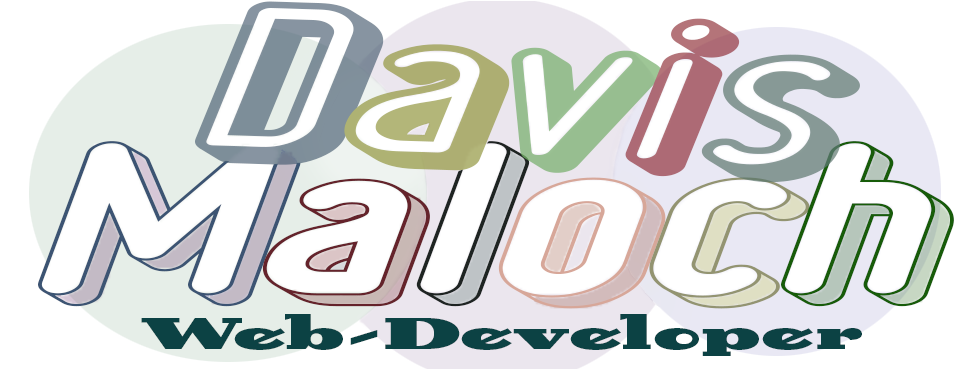
<style>
.page{position:relative;width:977px;height:370px;background:#ffffff}
.page>*{position:absolute;margin:0}
.t1{font:150px "RulerVolume";scale:1.75 1}
.t2{font:150px "RulerVolumeLine";color:#3c5473;scale:1.75 1}
.t3{font:150px "RulerVolumeLine";color:#65232b;scale:1.75 1}
.t4{font:150px "RulerVolumeLine";color:#1e2422;scale:1.75 1}
.t5{font:150px "RulerVolumeLine";color:#d7a799;scale:1.75 1}
.t6{font:150px "RulerVolumeLine";color:#939471;scale:1.75 1}
.t7{font:150px "RulerVolumeLine";color:#175c09;scale:1.75 1}
.t8{font:50px "Birra2-Stout";color:#0c4244;scale:1.75 1}
</style>
<div class="page">
<p class="t1" style="left:195px;top:1px;width:665px;height:182px;rotate:2deg">Davis</p>
<p class="t2" style="left:38px;top:141px;width:916px;height:168px">M<span class="t3">a</span><span class="t4">l</span><span class="t5">o</span><span class="t6">c</span><span class="t7">h</span></p>
<p class="t8" style="left:141px;top:314px;width:721px;height:42px">Web-Developer</p>
</div>
